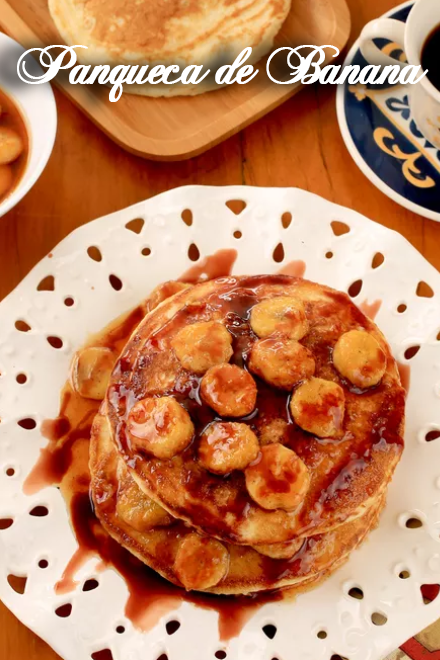
<style>
.page{position:relative;width:440px;height:660px}
.page>*{position:absolute;margin:0}
.t1{font:55px "ChopinScript";letter-spacing:-0.07em;color:#ffffff;font-weight:bold}
</style>
<div class="page">
<p class="t1" style="left:17px;top:45px;width:412px;height:57px">Panqueca de Banana</p>
</div>
